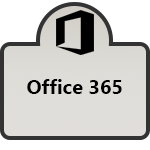
<style>
.page{position:relative;width:150px;height:150px;background:#ffffff}
.page>*{position:absolute;margin:0}
.t1{font:20px "Gadugi-Bold";color:#000000}
</style>
<div class="page">
<p class="t1" style="left:27px;top:79px;width:95px;height:15px">Office 365</p>
</div>
